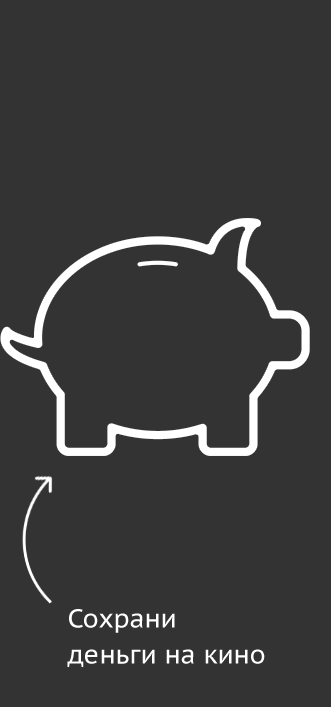
<style>
.page{position:relative;width:331px;height:707px;background:#333333}
.page>*{position:absolute;margin:0}
.t1{font:26px/36px "PTSans-Caption";color:#ffffff}
</style>
<div class="page">
<p class="t1" style="left:67px;top:609px;width:198px;height:58px">Сохрани<br>деньги на кино</p>
</div>
